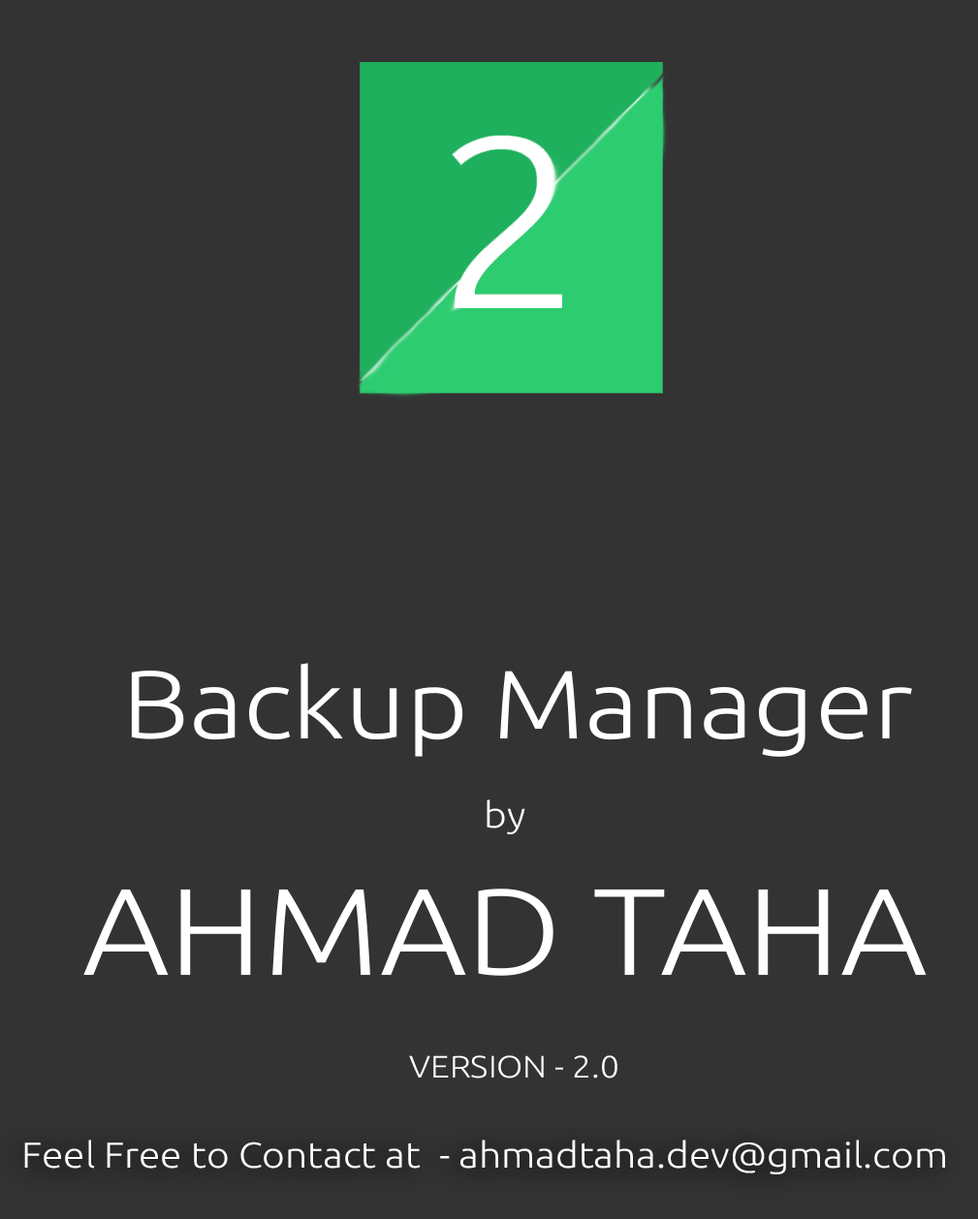
<style>
.page{position:relative;width:978px;height:1219px;background:#333333}
.page>*{position:absolute;margin:0}
.t1{font:96.9px "Ubuntu-Light";color:#ffffff;scale:1.1 1}
.t2{font:123.1px "Ubuntu-Light";color:#ffffff;scale:1.1 1}
.t3{font:35.9px "Ubuntu-Light";color:#ffffff;scale:1.1 1}
.t4{font:31px "Ubuntu-Light";color:#ffffff;scale:1.1 1}
</style>
<div class="page">
<p class="t1" style="left:131px;top:663px;width:781px;height:94px">Backup Manager</p>
<p class="t2" style="left:83px;top:800px;width:844px;height:176px;text-align:center"><span class="t3">by<br></span>AHMAD TAHA</p>
<p class="t4" style="left:409px;top:1056px;width:208px;height:23px">VERSION - 2.0</p>
<p class="t3" style="left:24px;top:1140px;width:921px;height:35px">Feel Free to Contact at  - ahmadtaha.dev@gmail.com</p>
</div>
